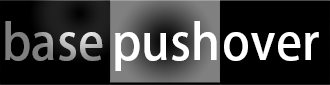
<style>
.page{position:relative;width:330px;height:85px;background:#000000}
.page>*{position:absolute;margin:0}
.t1{font:48.2px "KozGoPr6N-Medium"}
.t2{font:48.2px "KozGoPr6N-Medium";color:#ffffff}
</style>
<div class="page">
<p class="t1" style="left:5px;top:21px;width:98px;height:40px">base</p>
<p class="t2" style="left:115px;top:21px;width:102px;height:50px">push</p>
<p class="t2" style="left:224px;top:32px;width:95px;height:29px">over</p>
</div>
